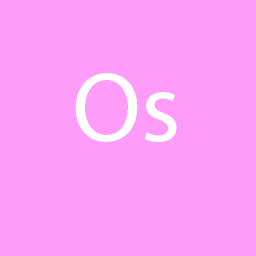
<style>
.page{position:relative;width:256px;height:256px;background:#ff9bf9}
.page>*{position:absolute;margin:0}
.t1{font:100px "MyriadPro-Regular";color:#ffffff}
</style>
<div class="page">
<p class="t1" style="left:75px;top:73px;width:102px;height:69px">Os</p>
</div>
